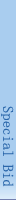
<style>
.page{position:relative;width:16px;height:200px;background:#a9cdef}
.page>*{position:absolute;margin:0}
.t1{font:14.7px "SimSun";color:#2b67aa}
</style>
<div class="page">
<p class="t1" style="left:1px;top:106px;width:13px;height:81px">Special Bid</p>
</div>
